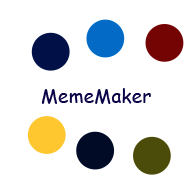
<style>
.page{position:relative;width:192px;height:192px;background:#ffffff}
.page>*{position:absolute;margin:0}
.t1{font:19.3px "ComicSansMS";color:#0a0348}
</style>
<div class="page">
<p class="t1" style="left:41px;top:88px;width:110px;height:16px">MemeMaker</p>
</div>
